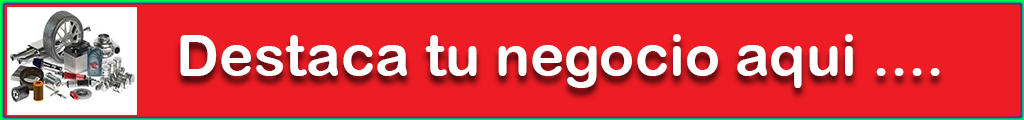
<style>
.page{position:relative;width:1024px;height:120px;background:#ee1c24}
.page>*{position:absolute;margin:0}
.t1{font:58.3px "ArialRoundedMTBold";color:#ffffff}
</style>
<div class="page">
<p class="t1" style="left:180px;top:34px;width:760px;height:54px">Destaca tu negocio aqui ....</p>
</div>
